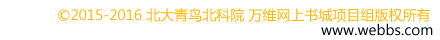
<style>
.page{position:relative;width:440px;height:40px;background:#ffffff}
.page>*{position:absolute;margin:0}
.t1{font:14px "MicrosoftYaHei";color:#fbb906}
.t2{font:14px "MicrosoftYaHei";color:#010d13}
</style>
<div class="page">
<p class="t1" style="left:58px;top:8px;width:373px;height:14px">©2015-2016 北大青鸟北科院 万维网上书城项目组版权所有</p>
<p class="t2" style="left:321px;top:23px;width:112px;height:13px">www.webbs.com</p>
</div>
